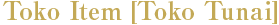
<style>
.page{position:relative;width:279px;height:25px;background:#ffffff}
.page>*{position:absolute;margin:0}
.t1{font:25px "RyuminPro-ExBold";color:#c3a956}
</style>
<div class="page">
<p class="t1" style="left:3px;top:1px;width:274px;height:23px">Toko Item [Toko Tunai]</p>
</div>
